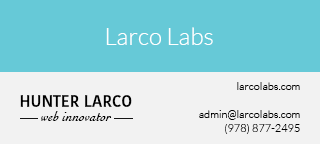
<style>
.page{position:relative;width:320px;height:144px;background:#66c9d7}
.page>*{position:absolute;margin:0}
.t1{font:24px "Lato-Light";color:#ffffff}
.t2{font:11px/14px "Lato-Light";color:#000000}
.t3{font:16px "KohinoorDevanagari-Medium";color:#000000}
.t4{font:14px "Cochin-Italic";color:#000000}
</style>
<div class="page">
<p class="t1" style="left:106px;top:27px;width:107px;height:18px">Larco Labs</p>
<p class="t2" style="left:199px;top:82px;width:101px;height:52px;text-align:right">larcolabs.com<br><br>admin@larcolabs.com<br>(978) 877-2495</p>
<p class="t3" style="left:20px;top:95px;width:112px;height:12px">HUNTER LARCO</p>
<p class="t4" style="left:41px;top:111px;width:71px;height:10px">web innovator</p>
</div>
